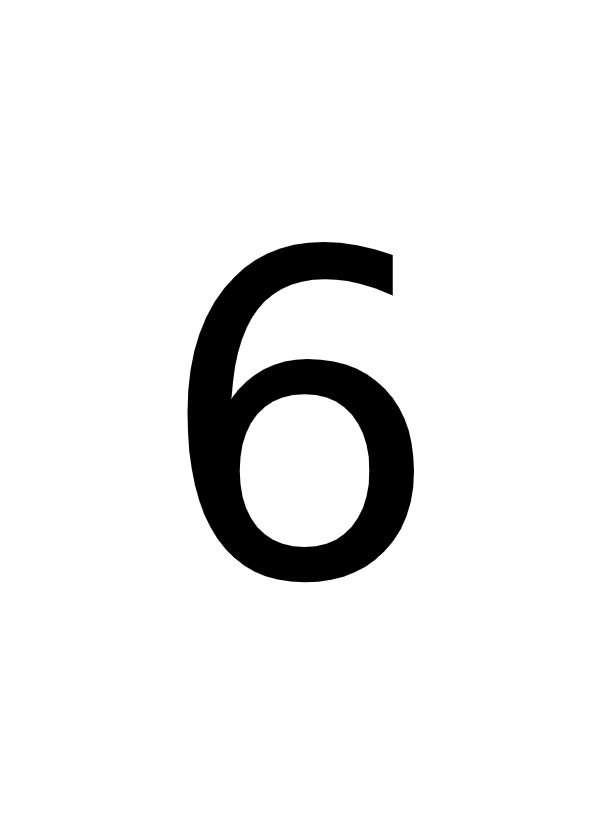
<style>
.page{position:relative;width:600px;height:825px;background:#ffffff}
.page>*{position:absolute;margin:0}
.t1{font:450px "DejaVuSans";color:#000000}
</style>
<div class="page">
<p class="t1" style="left:187px;top:241px;width:227px;height:342px">6</p>
</div>
